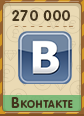
<style>
.page{position:relative;width:84px;height:116px;background:#eadab4}
.page>*{position:absolute;margin:0}
.t1{font:15px "RotondaC-Bold";letter-spacing:0.04em;color:#43341d;text-transform:uppercase}
.t2{font:15px "RotondaC-Bold";letter-spacing:0.04em;color:#43341d;font-variant:small-caps}
</style>
<div class="page">
<p class="t1" style="left:12px;top:10px;width:58px;height:11px">270 000</p>
<p class="t2" style="left:11px;top:97px;width:62px;height:11px">Вконтакте</p>
</div>
